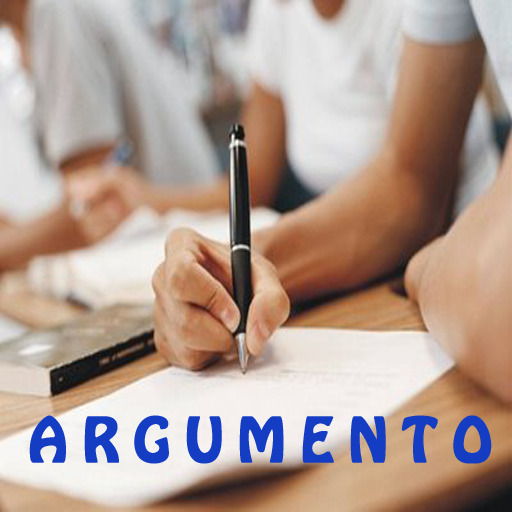
<style>
.page{position:relative;width:512px;height:512px}
.page>*{position:absolute;margin:0}
.t1{font:55px "HoboStd";letter-spacing:0.25em;color:#143dc4;text-transform:uppercase;font-weight:bold}
</style>
<div class="page">
<p class="t1" style="left:29px;top:415px;width:463px;height:49px">Argumento</p>
</div>
